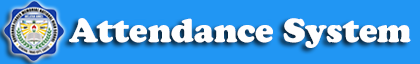
<style>
.page{position:relative;width:420px;height:64px;background:#2196f3}
.page>*{position:absolute;margin:0}
.t1{font:34.9px "CooperBlack";color:#fefefe}
</style>
<div class="page">
<p class="t1" style="left:69px;top:18px;width:342px;height:30px">Attendance System</p>
</div>
